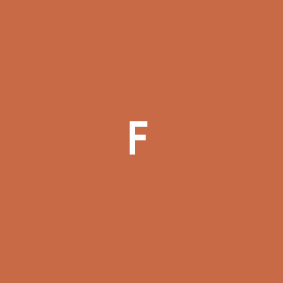
<style>
.page{position:relative;width:283px;height:283px;background:#c86a46}
.page>*{position:absolute;margin:0}
.t1{font:46.2px "Arial-BoldMT";color:#ffffff;scale:0.78 1}
</style>
<div class="page">
<p class="t1" style="left:129px;top:121px;width:19px;height:34px">F</p>
</div>
